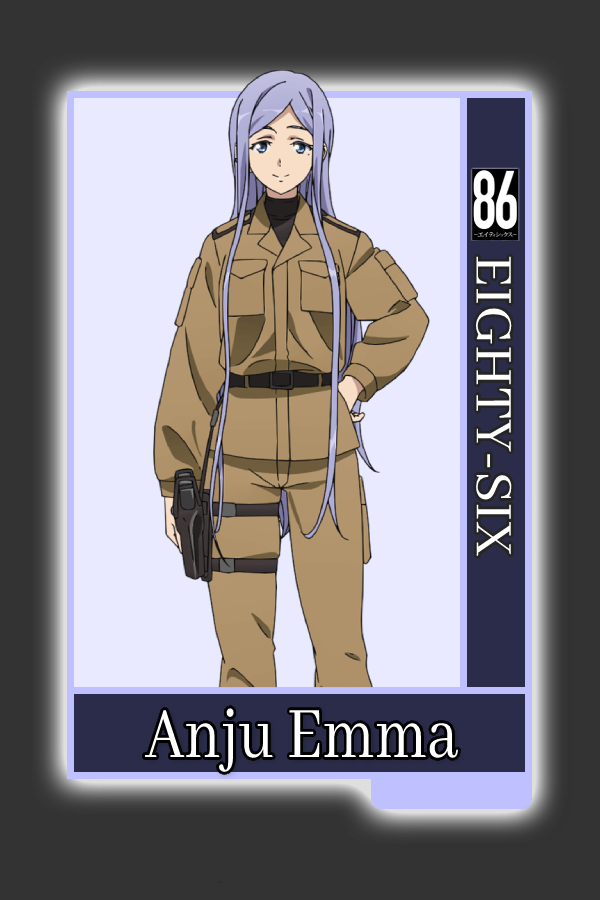
<style>
.page{position:relative;width:600px;height:900px;background:#e9e9ff}
.page>*{position:absolute;margin:0}
.t1{font:58.2px "AbhayaLibre-Regular";color:#ffffff}
.t2{font:79.6px "AbhayaLibre-Regular";color:#ffffff;scale:0.83 1}
</style>
<div class="page">
<p class="t1" style="left:476px;top:256px;width:36px;height:300px;rotate:90deg">EIGHTY-SIX</p>
<p class="t2" style="left:145px;top:708px;width:313px;height:64px">Anju Emma</p>
</div>
